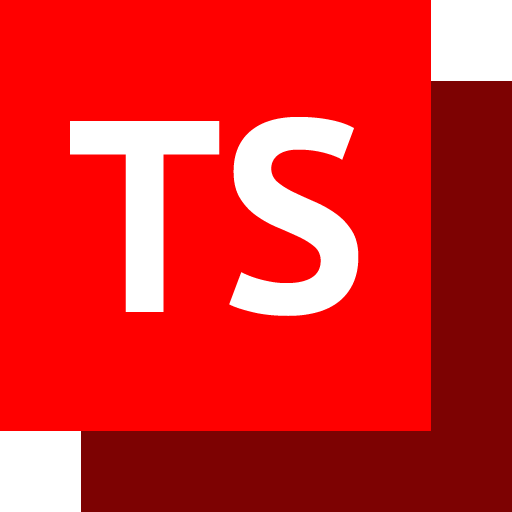
<style>
.page{position:relative;width:512px;height:512px;background:#ff0000}
.page>*{position:absolute;margin:0}
.t1{font:273px "PTSans-Bold";color:#ffffff}
</style>
<div class="page">
<p class="t1" style="left:70px;top:117px;width:289px;height:199px">TS</p>
</div>
